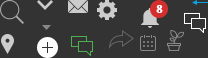
<style>
.page{position:relative;width:208px;height:58px;background:#333333}
.page>*{position:absolute;margin:0}
.t1{font:11px "OpenSans-Extrabold";color:#ffffff}
</style>
<div class="page">
<p class="t1" style="left:156px;top:5px;width:7px;height:8px">8</p>
</div>
